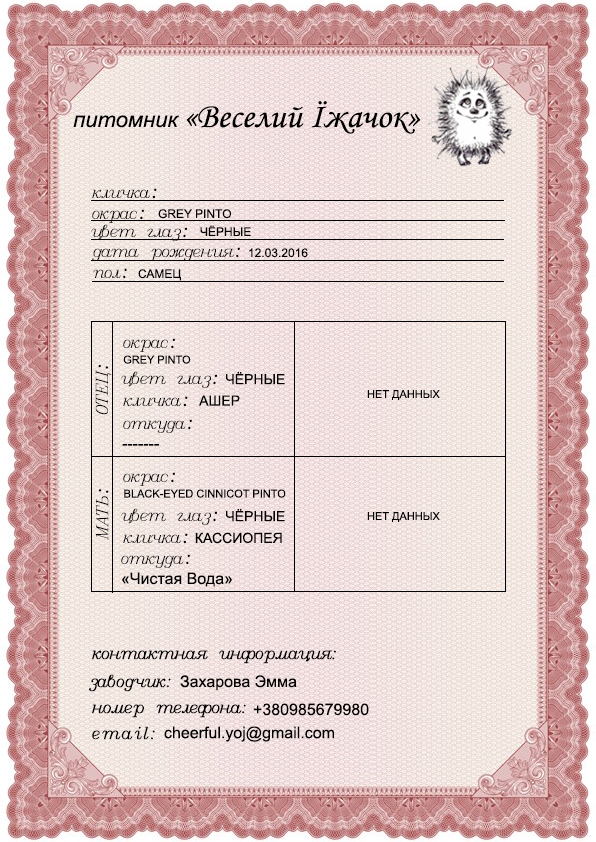
<style>
.page{position:relative;width:596px;height:842px}
.page>*{position:absolute;margin:0}
.t1{font:35px "MonotypeCorsiva";color:#000000}
.t2{font:21.7px "Arial-ItalicMT";color:#000000}
.t3{font:16px "Italic";color:#000000}
.t4{font:16px "LucidaHandwriting-Italic";color:#000000}
.t5{font:12px "ArialMT";color:#000000}
.t6{font:11px "ArialMT";color:#000000}
.t7{font:14px "ArialMT";color:#000000}
.t8{font:16px "ArialMT";color:#000000}
.t9{font:16px "Italic";color:#000000;font-weight:bold}
</style>
<div class="page">
<p class="t1" style="left:73px;top:101px;width:348px;height:33px"><span class="t2">питомник </span>«Веселий Їжачок»</p>
<p class="t3" style="left:92px;top:188px;width:65px;height:11px">кличка<span class="t4">:</span></p>
<p class="t3" style="left:92px;top:209px;width:52px;height:14px">окрас<span class="t4">:</span></p>
<p class="t5" style="left:158px;top:209px;width:74px;height:10px">GREY PINTO</p>
<p class="t3" style="left:91px;top:224px;width:96px;height:17px">цвет глаз<span class="t4">:</span></p>
<p class="t5" style="left:200px;top:225px;width:51px;height:11px">ЧЁРНЫЕ</p>
<p class="t3" style="left:92px;top:247px;width:148px;height:14px">дата рождения<span class="t4">:</span></p>
<p class="t5" style="left:249px;top:248px;width:59px;height:10px">12.03.2016</p>
<p class="t3" style="left:93px;top:268px;width:34px;height:11px">пол<span class="t4">:</span></p>
<p class="t5" style="left:138px;top:269px;width:43px;height:12px">САМЕЦ</p>
<p class="t3" style="left:123px;top:338px;width:52px;height:14px">окрас<span class="t4">:</span></p>
<p class="t3" style="left:95px;top:365px;width:17px;height:50px;rotate:-90deg">ОТЕЦ<span class="t4">:</span></p>
<p class="t6" style="left:123px;top:355px;width:68px;height:9px">GREY PINTO</p>
<p class="t3" style="left:121px;top:371px;width:96px;height:17px">цвет глаз<span class="t4">:</span></p>
<p class="t7" style="left:226px;top:372px;width:59px;height:13px">ЧЁРНЫЕ</p>
<p class="t6" style="left:367px;top:390px;width:73px;height:10px">НЕТ ДАННЫХ</p>
<p class="t3" style="left:123px;top:396px;width:65px;height:11px">кличка<span class="t4">:</span></p>
<p class="t7" style="left:199px;top:395px;width:41px;height:11px">АШЕР</p>
<p class="t3" style="left:123px;top:419px;width:69px;height:14px">откуда<span class="t4">:</span></p>
<p class="t8" style="left:122px;top:444px;width:37px;height:2px">-------</p>
<p class="t3" style="left:123px;top:472px;width:52px;height:14px">окрас<span class="t4">:</span></p>
<p class="t3" style="left:96px;top:489px;width:13px;height:51px;rotate:-90deg">МАТЬ<span class="t4">:</span></p>
<p class="t6" style="left:124px;top:489px;width:162px;height:9px">BLACK-EYED CINNICOT PINTO</p>
<p class="t3" style="left:121px;top:508px;width:96px;height:17px">цвет глаз<span class="t4">:</span></p>
<p class="t7" style="left:226px;top:509px;width:59px;height:13px">ЧЁРНЫЕ</p>
<p class="t6" style="left:367px;top:512px;width:73px;height:10px">НЕТ ДАННЫХ</p>
<p class="t3" style="left:123px;top:533px;width:65px;height:11px">кличка<span class="t4">:</span></p>
<p class="t7" style="left:195px;top:532px;width:87px;height:12px">КАССИОПЕЯ</p>
<p class="t3" style="left:121px;top:554px;width:69px;height:14px">откуда<span class="t4">:</span></p>
<p class="t8" style="left:122px;top:572px;width:110px;height:15px">«Чистая Вода»</p>
<p class="t9" style="left:92px;top:650px;width:244px;height:14px">контактная информация:</p>
<p class="t9" style="left:89px;top:674px;width:82px;height:18px">заводчик:</p>
<p class="t8" style="left:180px;top:675px;width:117px;height:16px">Захарова Эмма</p>
<p class="t9" style="left:92px;top:704px;width:154px;height:14px">номер телефона:</p>
<p class="t8" style="left:253px;top:703px;width:116px;height:13px">+380985679980</p>
<p class="t9" style="left:92px;top:726px;width:63px;height:14px">email:</p>
<p class="t8" style="left:164px;top:726px;width:170px;height:16px">cheerful.yoj@gmail.com</p>
</div>
